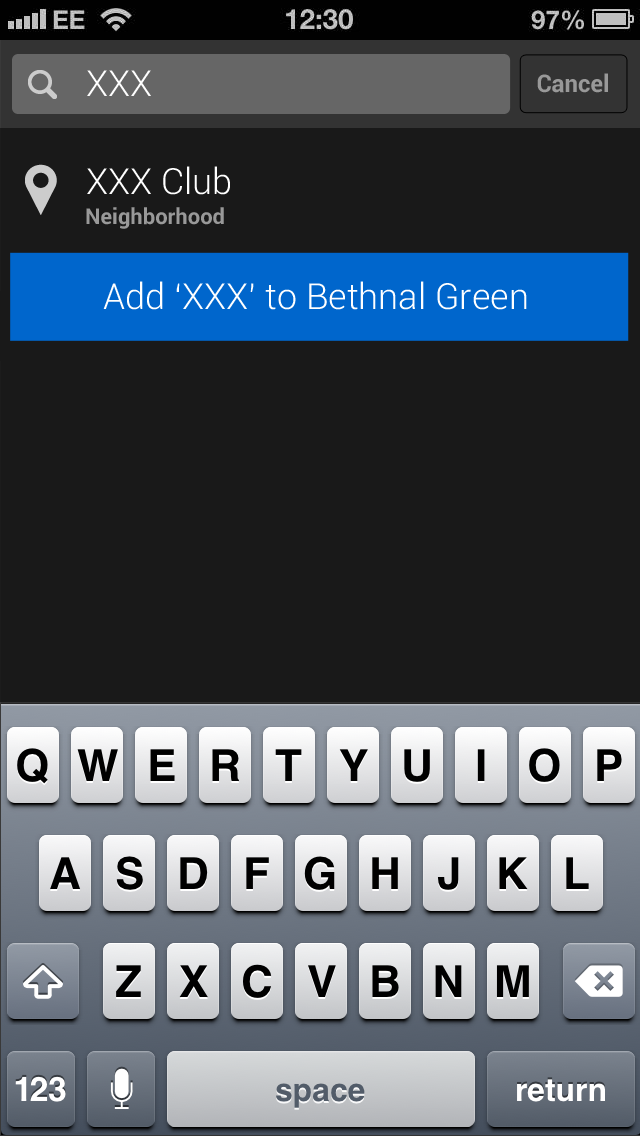
<style>
.page{position:relative;width:640px;height:1136px;background:#191919}
.page>*{position:absolute;margin:0}
.t1{font:36px "Roboto-Light";color:#ffffff}
.t2{font:24px "Roboto-Bold";color:#999999}
.t3{font:22px "Roboto-Bold";color:#999999}
</style>
<div class="page">
<p class="t1" style="left:87px;top:70px;width:64px;height:26px">XXX</p>
<p class="t2" style="left:537px;top:73px;width:71px;height:20px">Cancel</p>
<p class="t1" style="left:87px;top:166px;width:143px;height:29px">XXX Club</p>
<p class="t3" style="left:86px;top:207px;width:138px;height:22px">Neighborhood</p>
<p class="t1" style="left:103px;top:281px;width:424px;height:29px">Add ‘XXX’ to Bethnal Green</p>
</div>
